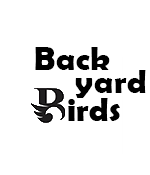
<style>
.page{position:relative;width:150px;height:175px;background:#ffffff}
.page>*{position:absolute;margin:0}
.t1{font:33.3px "BerlinSansFBDemi-Bold";letter-spacing:0.01em;color:#000000}
</style>
<div class="page">
<p class="t1" style="left:35px;top:47px;width:75px;height:23px">Back</p>
<p class="t1" style="left:75px;top:70px;width:71px;height:28px">yard</p>
</div>
